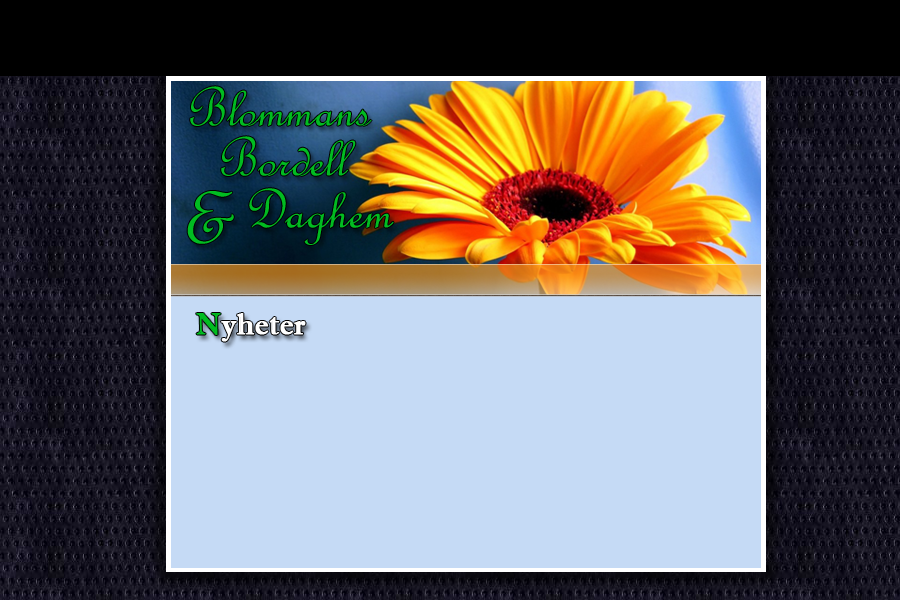
<style>
.page{position:relative;width:900px;height:600px;background:#c5daf5}
.page>*{position:absolute;margin:0}
.t1{font:60px "FrenchScriptMT";color:#01bc21;font-style:italic}
.t2{font:90px "FrenchScriptMT";color:#01bc21;font-style:italic}
.t3{font:30px "ImprintMT-Shadow";color:#ffffff;font-weight:bold}
.t4{font:30px "ImprintMT-Shadow";color:#01bc21;font-weight:bold}
</style>
<div class="page">
<p class="t1" style="left:190px;top:86px;width:182px;height:40px">Blommans</p>
<p class="t1" style="left:221px;top:136px;width:135px;height:40px">Bordell</p>
<p class="t2" style="left:187px;top:191px;width:47px;height:53px">&amp;</p>
<p class="t1" style="left:249px;top:188px;width:145px;height:57px">Daghem</p>
<p class="t3" style="left:196px;top:313px;width:110px;height:29px"><span class="t4">N</span>yheter</p>
</div>
